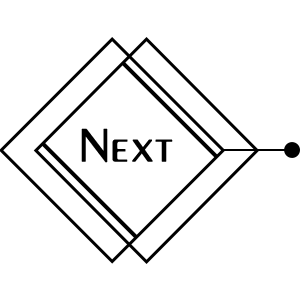
<style>
.page{position:relative;width:300px;height:300px;background:#ffffff}
.page>*{position:absolute;margin:0}
.t1{font:49.6px "Peignot";color:#000000;font-weight:bold}
</style>
<div class="page">
<p class="t1" style="left:81px;top:128px;width:92px;height:35px">Next</p>
</div>
